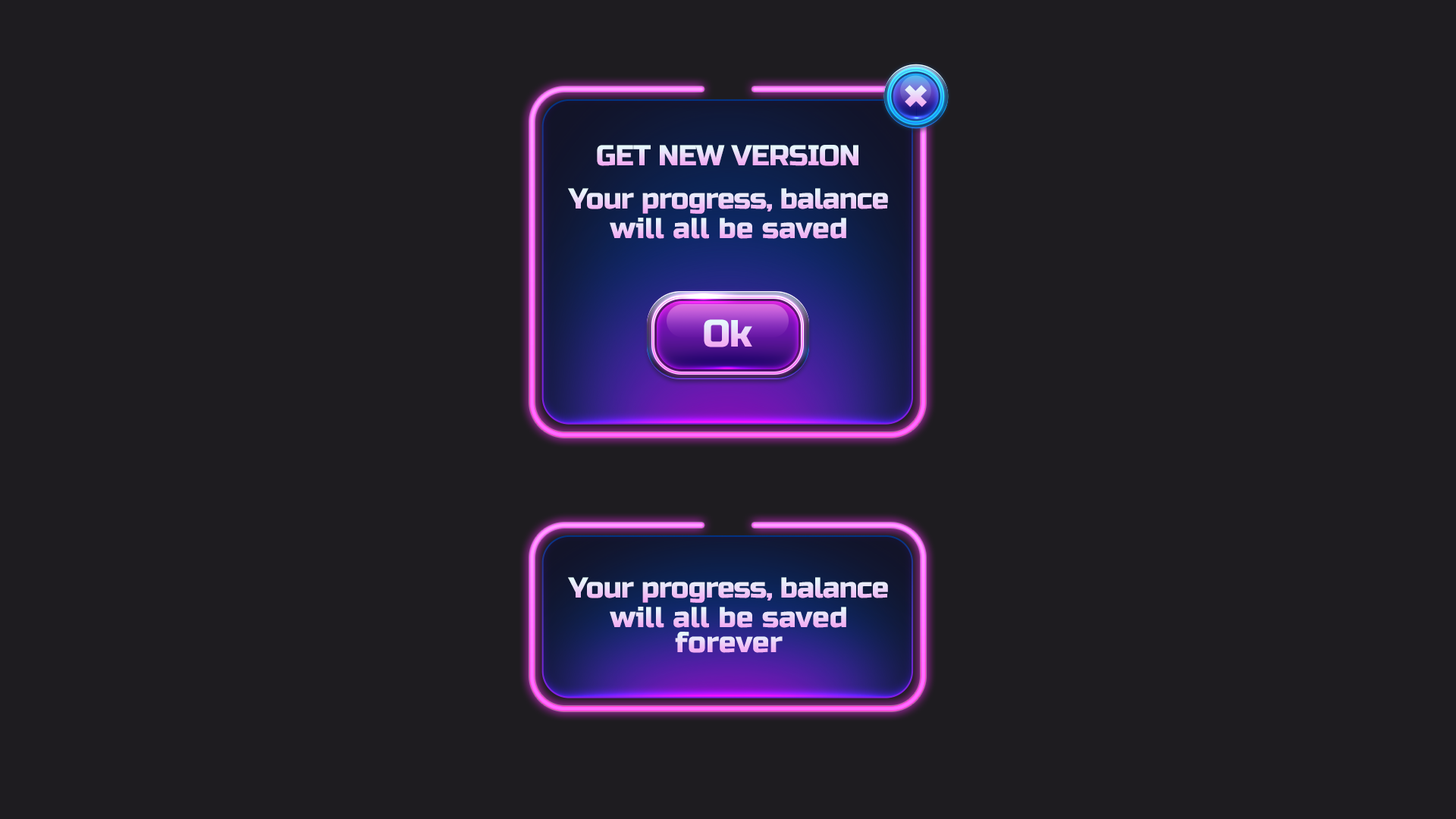
<style>
.page{position:relative;width:1456px;height:819px;background:#1e1c20}
.page>*{position:absolute;margin:0}
.t1{font:28.8px "RussoOne-Regular";letter-spacing:-0.025em;text-transform:uppercase}
.t2{font:28.8px "RussoOne-Regular";letter-spacing:-0.025em}
.t3{font:28.8px "RussoOne-Regular"}
.t4{font:37.9px "RussoOne-Regular";letter-spacing:-0.025em}
</style>
<div class="page">
<p class="t1" style="left:597px;top:145px;width:261px;height:21px">get new version</p>
<p class="t2" style="left:568px;top:188px;width:320px;height:26px">Your progress, balance</p>
<p class="t3" style="left:610px;top:218px;width:236px;height:21px">will all be saved</p>
<p class="t4" style="left:704px;top:319px;width:48px;height:28px">Ok</p>
<p class="t2" style="left:568px;top:577px;width:320px;height:26px">Your progress, balance</p>
<p class="t3" style="left:610px;top:607px;width:236px;height:21px">will all be saved</p>
<p class="t3" style="left:675px;top:632px;width:108px;height:21px">forever</p>
</div>
